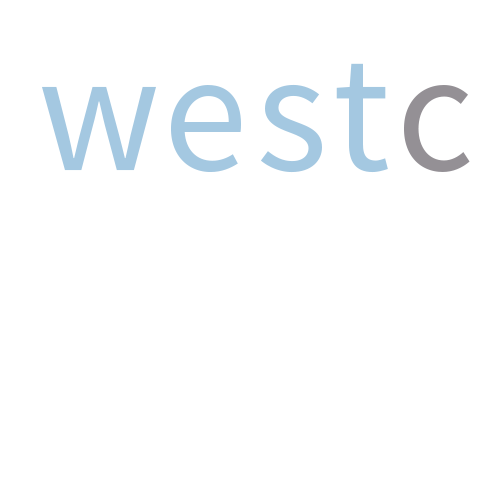
<style>
.page{position:relative;width:500px;height:500px;background:#ffffff}
.page>*{position:absolute;margin:0}
.t1{font:170px "SourceSansPro-Regular";letter-spacing:0.05em;color:#a4c8e1}
.t2{font:170px "SourceSansPro-Regular";letter-spacing:0.025em;color:#a4c8e1}
.t3{font:170px "SourceSansPro-Regular";letter-spacing:0.05em;color:#949095}
</style>
<div class="page">
<p class="t1" style="left:42px;top:63px;width:428px;height:110px"><span class="t2">w</span>est<span class="t3">c</span></p>
</div>
